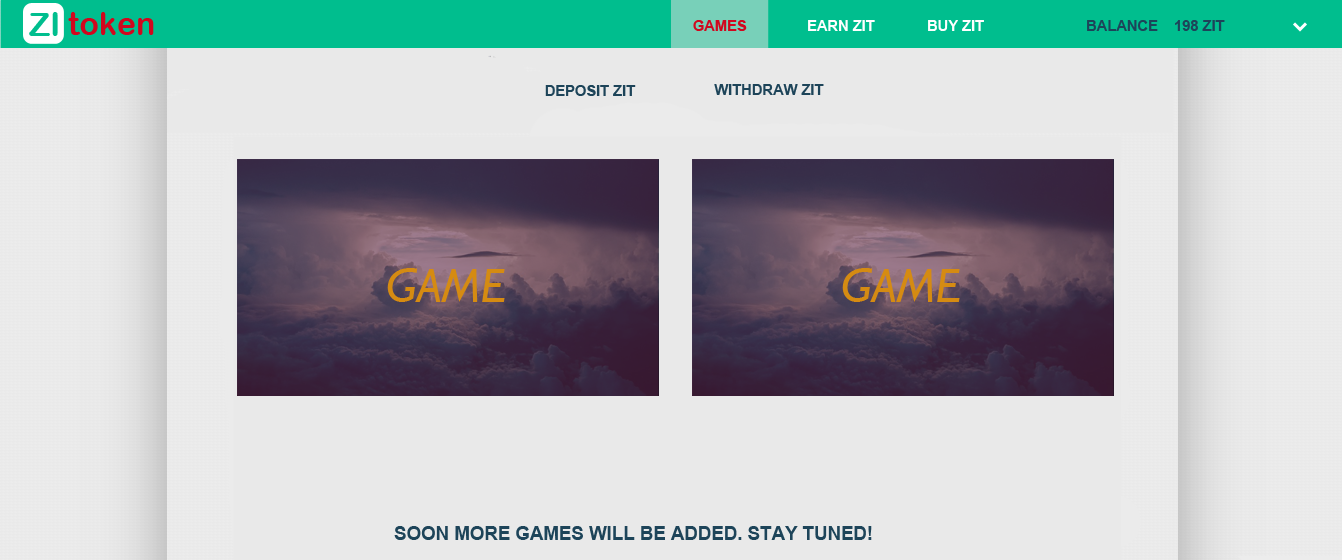
<style>
.page{position:relative;width:1342px;height:560px;background:#e9e9e9}
.page>*{position:absolute;margin:0}
.t1{font:33.3px "ArialRoundedMTBold";color:#00be8e}
.t2{font:32px "ArialRoundedMTBold";color:#d1071e}
.t3{font:14.7px "Arial-BoldMT";color:#d1071e}
.t4{font:14.7px "Arial-BoldMT";color:#ffffff}
.t5{font:14.7px "Arial-BoldMT";color:#1d4459}
.t6{font:48px "Humanist521BT-Italic";color:#d58b12}
.t7{font:48px "Humanist521BT-Roman";color:#ffffff}
.t8{font:18.7px "Arial-BoldMT";color:#1d4459}
</style>
<div class="page">
<p class="t1" style="left:29px;top:12px;width:29px;height:24px">ZI</p>
<p class="t2" style="left:68px;top:12px;width:86px;height:23px">token</p>
<p class="t3" style="left:693px;top:20px;width:54px;height:11px">GAMES</p>
<p class="t4" style="left:808px;top:20px;width:67px;height:11px">EARN ZIT</p>
<p class="t4" style="left:928px;top:20px;width:56px;height:11px">BUY ZIT</p>
<p class="t5" style="left:1087px;top:20px;width:138px;height:11px">BALANCE    198 ZIT</p>
<p class="t5" style="left:545px;top:85px;width:91px;height:11px">DEPOSIT ZIT</p>
<p class="t5" style="left:714px;top:84px;width:110px;height:11px">WITHDRAW ZIT</p>
<p class="t6" style="left:387px;top:268px;width:118px;height:34px"><span class="t7"> <br>          <br></span>             GAME</p>
<p class="t8" style="left:394px;top:526px;width:478px;height:14px">SOON MORE GAMES WILL BE ADDED. STAY TUNED!</p>
</div>
